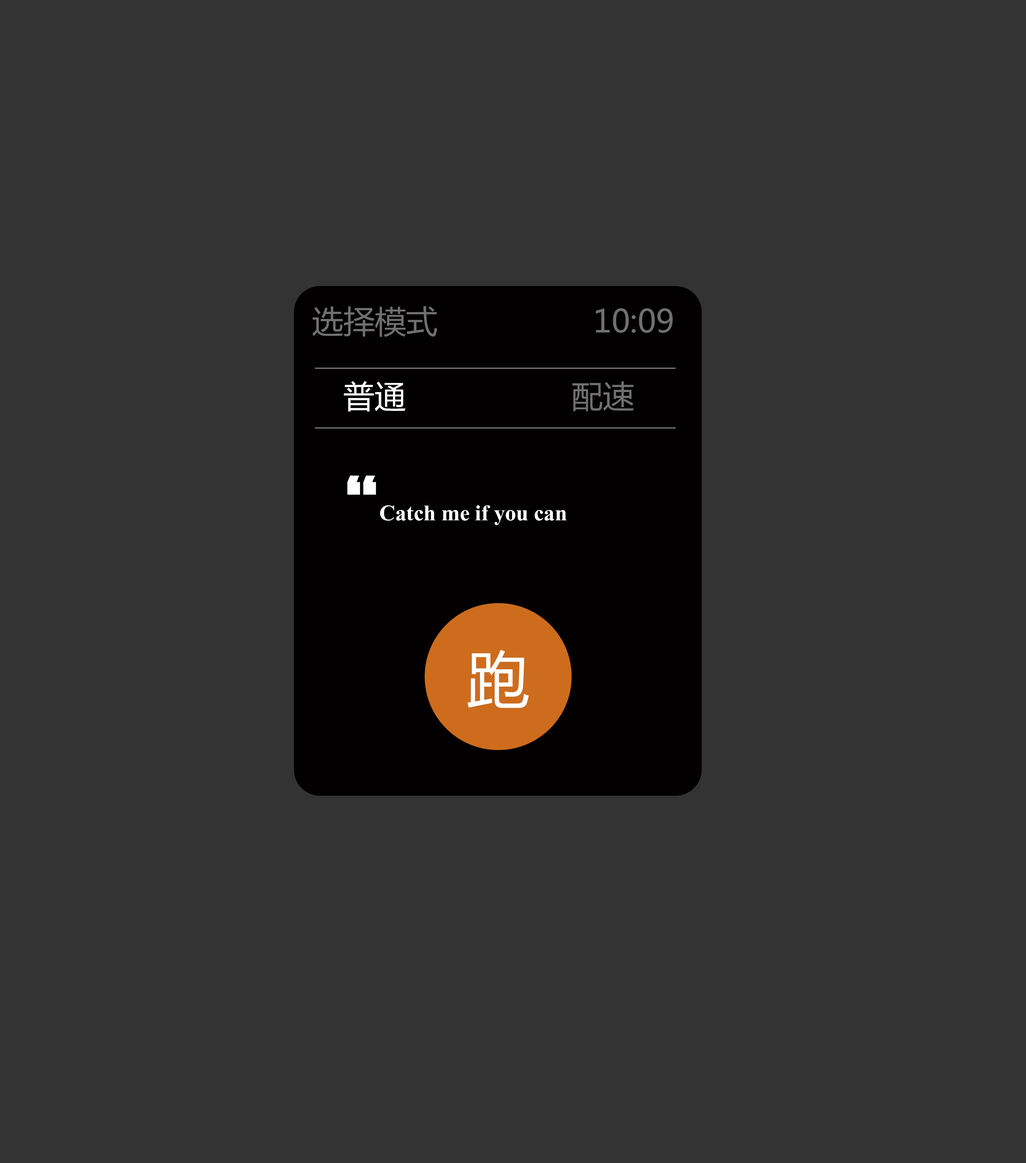
<style>
.page{position:relative;width:1026px;height:1163px;background:#333333}
.page>*{position:absolute;margin:0}
.t1{font:31.4px "MicrosoftYaHei";color:#717071}
.t2{font:31.4px "MicrosoftYaHei";color:#ffffff}
.t3{font:78.4px "FZFMJW--GB1-0";color:#ffffff}
.t4{font:27.4px "Aparajita-Bold";color:#ffffff}
.t5{font:62.7px "MicrosoftYaHei";color:#ffffff}
</style>
<div class="page">
<p class="t1" style="left:312px;top:306px;width:125px;height:31px">选择模式</p>
<p class="t1" style="left:595px;top:308px;width:78px;height:25px">10:09</p>
<p class="t2" style="left:344px;top:381px;width:61px;height:30px">普通</p>
<p class="t1" style="left:572px;top:381px;width:62px;height:30px">配速</p>
<p class="t3" style="left:347px;top:475px;width:29px;height:20px">“</p>
<p class="t4" style="left:380px;top:505px;width:187px;height:20px">Catch me if you can</p>
<p class="t5" style="left:467px;top:649px;width:62px;height:59px">跑</p>
</div>
